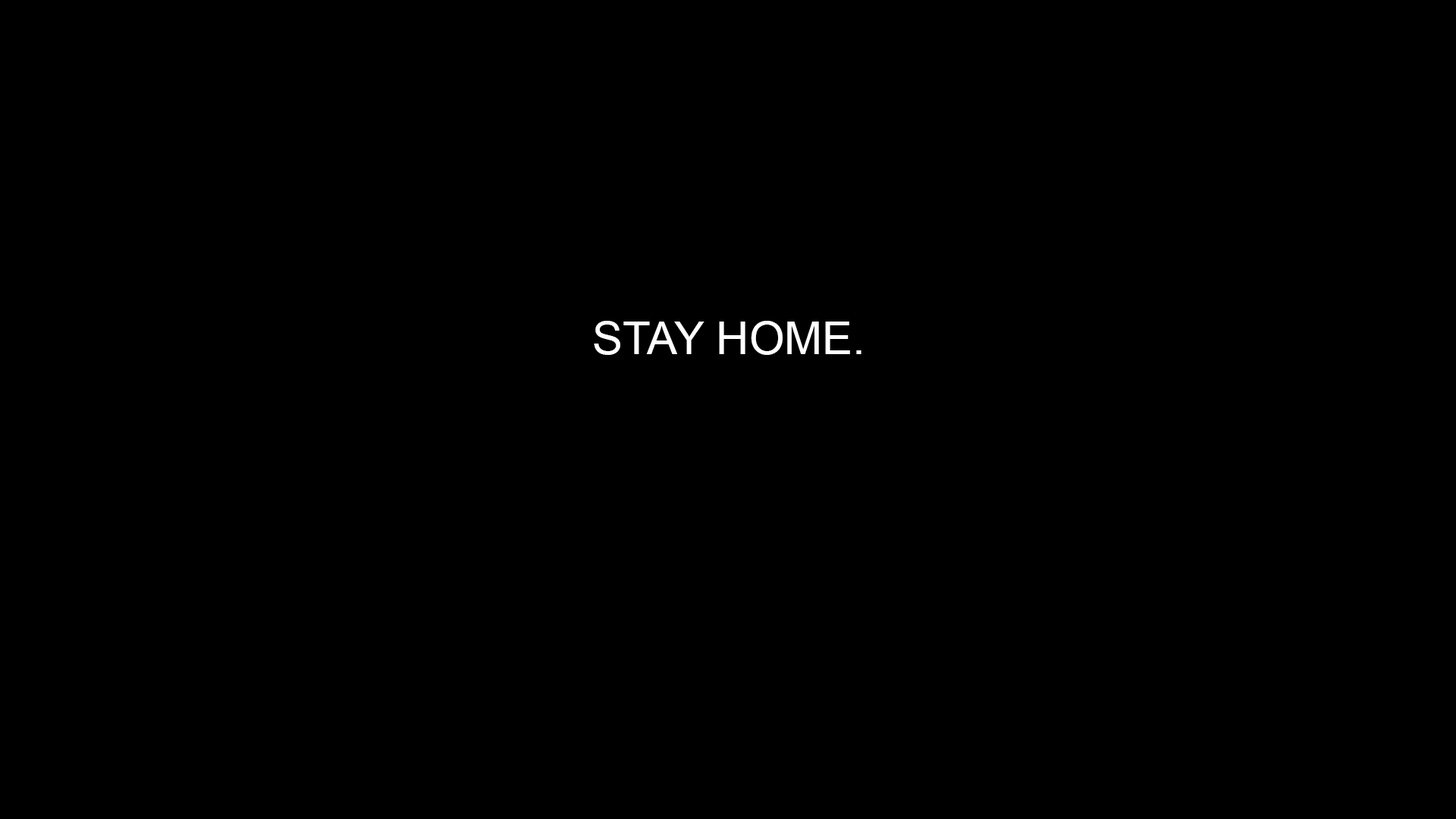
<style>
.page{position:relative;width:1456px;height:819px;background:#000000}
.page>*{position:absolute;margin:0}
.t1{font:45.5px "ArialMT";color:#ffffff}
</style>
<div class="page">
<p class="t1" style="left:594px;top:321px;width:267px;height:34px">STAY HOME.</p>
</div>
